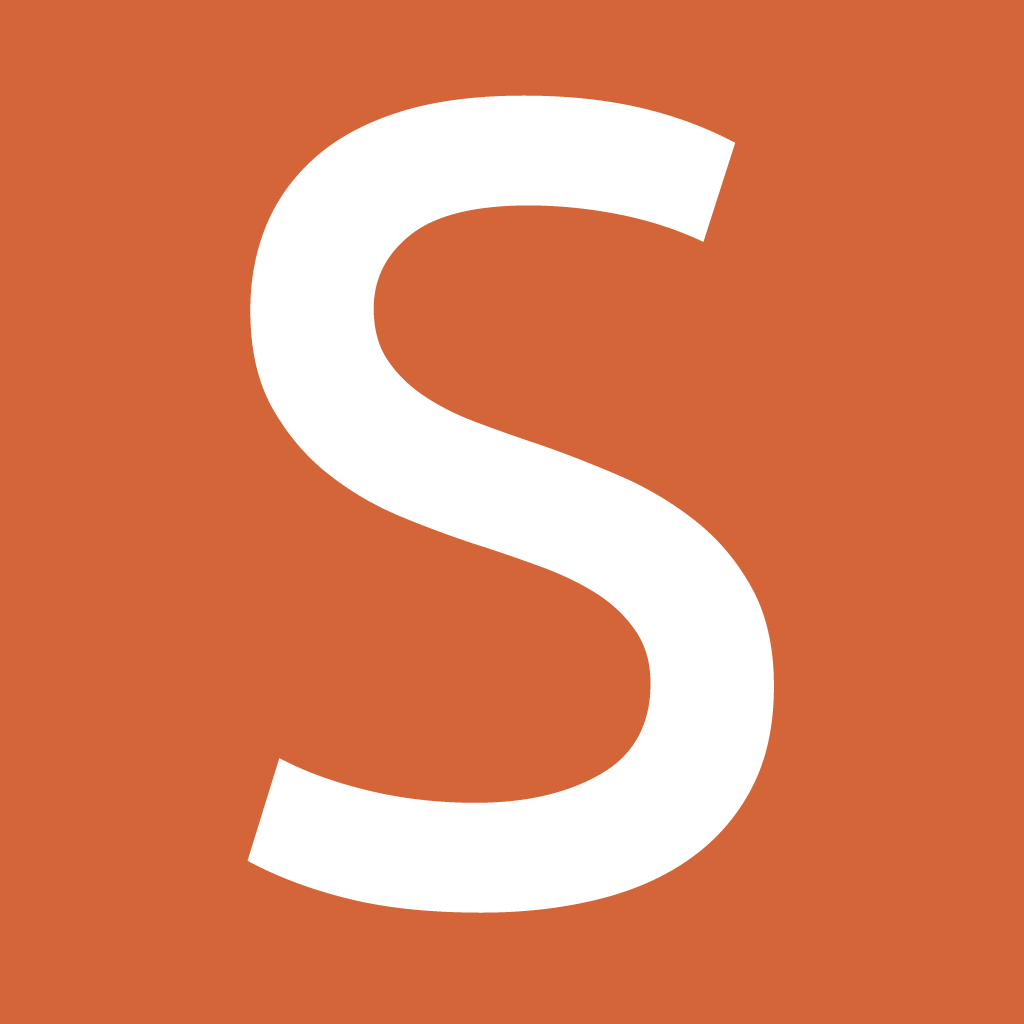
<style>
.page{position:relative;width:1024px;height:1024px;background:#d46539}
.page>*{position:absolute;margin:0}
.t1{font:1173.7px "SukhumvitSet-SemiBold";color:#ffffff}
</style>
<div class="page">
<p class="t1" style="left:247px;top:95px;width:527px;height:818px">S</p>
</div>
